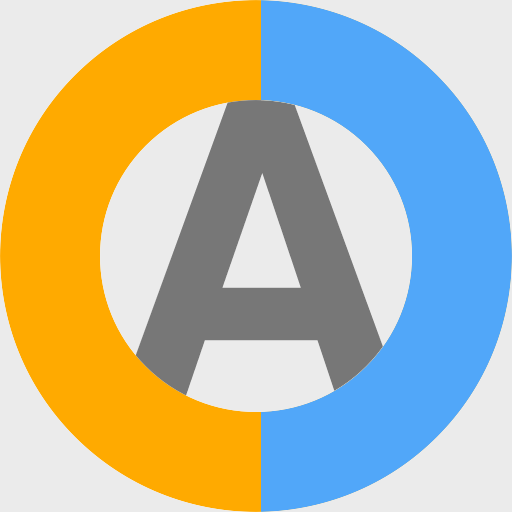
<style>
.page{position:relative;width:512px;height:512px;background:#ebebeb}
.page>*{position:absolute;margin:0}
.t1{font:445.8px "DINPro-Bold";letter-spacing:0.01em;color:#777777}
</style>
<div class="page">
<p class="t1" style="left:120px;top:78px;width:281px;height:319px">A</p>
</div>
